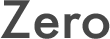
<style>
.page{position:relative;width:110px;height:39px;background:#ffffff}
.page>*{position:absolute;margin:0}
.t1{font:50px "Futura-Medium";color:#474747;scale:1.05 1}
</style>
<div class="page">
<p class="t1" style="left:0px;top:0px;width:110px;height:39px">Zero</p>
</div>
